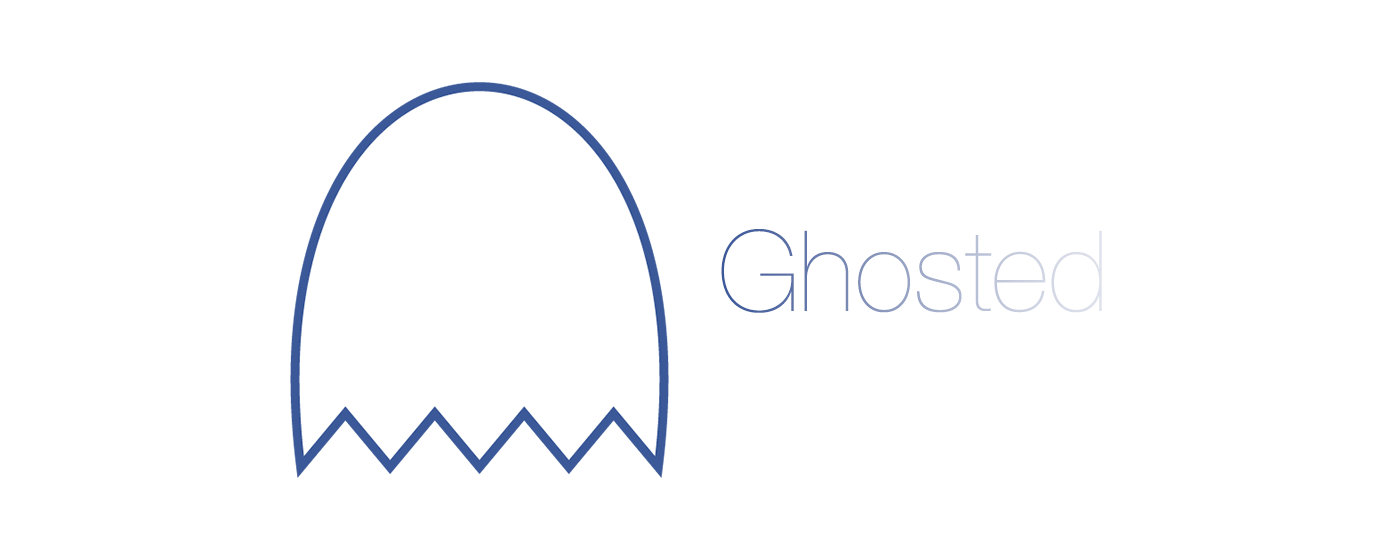
<style>
.page{position:relative;width:1400px;height:560px;background:#ffffff}
.page>*{position:absolute;margin:0}
.t1{font:112px "HelveticaNeue-UltraLight"}
</style>
<div class="page">
<p class="t1" style="left:721px;top:229px;width:381px;height:84px">Ghosted</p>
</div>
